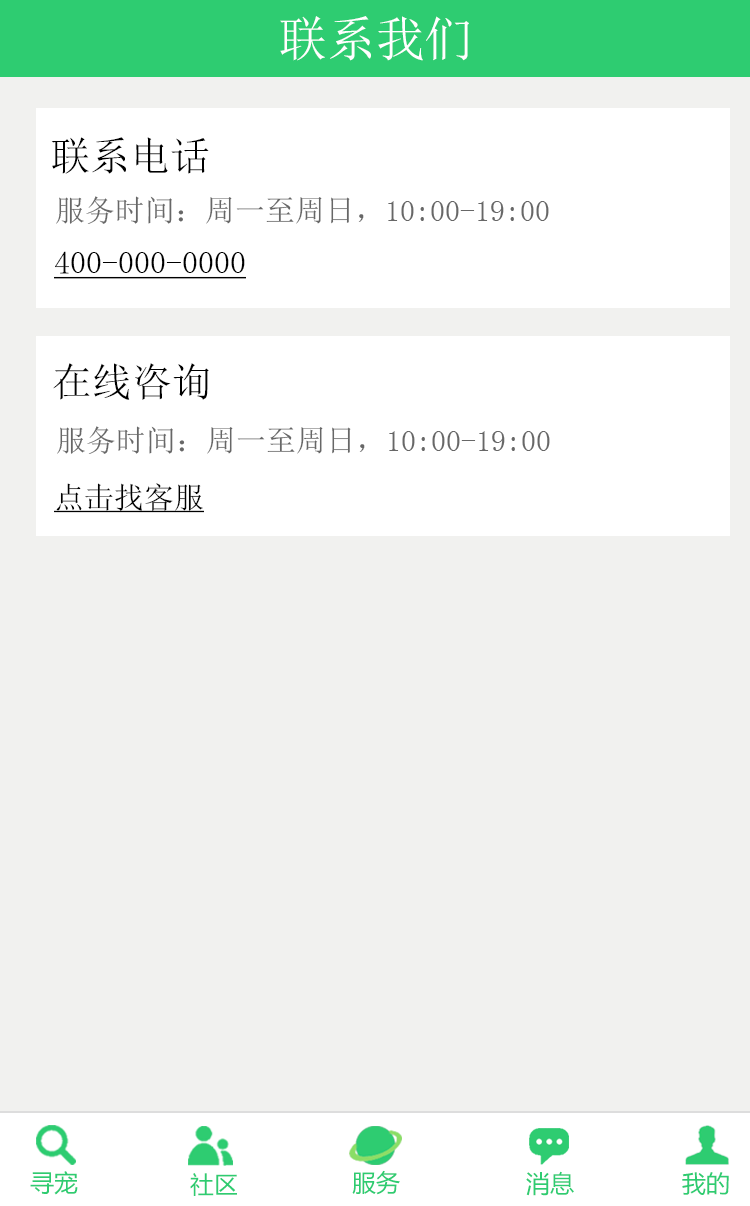
<style>
.page{position:relative;width:750px;height:1206px;background:#f1f1ef}
.page>*{position:absolute;margin:0}
.t1{font:48.7px "SimSun";color:#ffffff}
.t2{font:40px "SimSun";color:#000000}
.t3{font:30px "SimSun";color:#676767}
.t4{font:32px "SimSun";color:#000000;text-decoration:underline}
.t5{font:30px "SimSun";color:#000000;text-decoration:underline}
.t6{font:24px "MicrosoftYaHei";color:#2ecc71}
.t7{font:24px "MicrosoftYaHei"}
</style>
<div class="page">
<p class="t1" style="left:280px;top:16px;width:189px;height:45px">联系我们</p>
<p class="t2" style="left:51px;top:137px;width:158px;height:37px">联系电话</p>
<p class="t3" style="left:56px;top:196px;width:493px;height:28px">服务时间：周一至周日，10:00-19:00</p>
<p class="t4" style="left:54px;top:251px;width:192px;height:28px">400-000-0000</p>
<p class="t2" style="left:53px;top:363px;width:156px;height:37px">在线咨询</p>
<p class="t3" style="left:57px;top:426px;width:493px;height:28px">服务时间：周一至周日，10:00-19:00</p>
<p class="t5" style="left:54px;top:483px;width:150px;height:30px">点击找客服</p>
<p class="t6" style="left:30px;top:1171px;width:48px;height:24px">寻宠</p>
<p class="t6" style="left:190px;top:1173px;width:47px;height:23px">社区</p>
<p class="t7" style="left:352px;top:1171px;width:48px;height:25px">服务</p>
<p class="t6" style="left:352px;top:1170px;width:48px;height:25px">服务</p>
<p class="t7" style="left:525px;top:1171px;width:48px;height:25px">消息</p>
<p class="t6" style="left:526px;top:1171px;width:48px;height:25px">消息</p>
<p class="t6" style="left:682px;top:1172px;width:47px;height:23px">我的</p>
<p class="t6" style="left:682px;top:1172px;width:47px;height:23px">我的</p>
</div>
